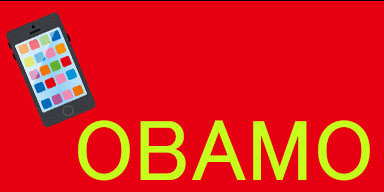
<style>
.page{position:relative;width:384px;height:192px;background:#e60012}
.page>*{position:absolute;margin:0}
.t1{font:88.1px "MS-PGothic";color:#c4ff1e}
</style>
<div class="page">
<p class="t1" style="left:78px;top:120px;width:292px;height:61px">OBAMO</p>
</div>
